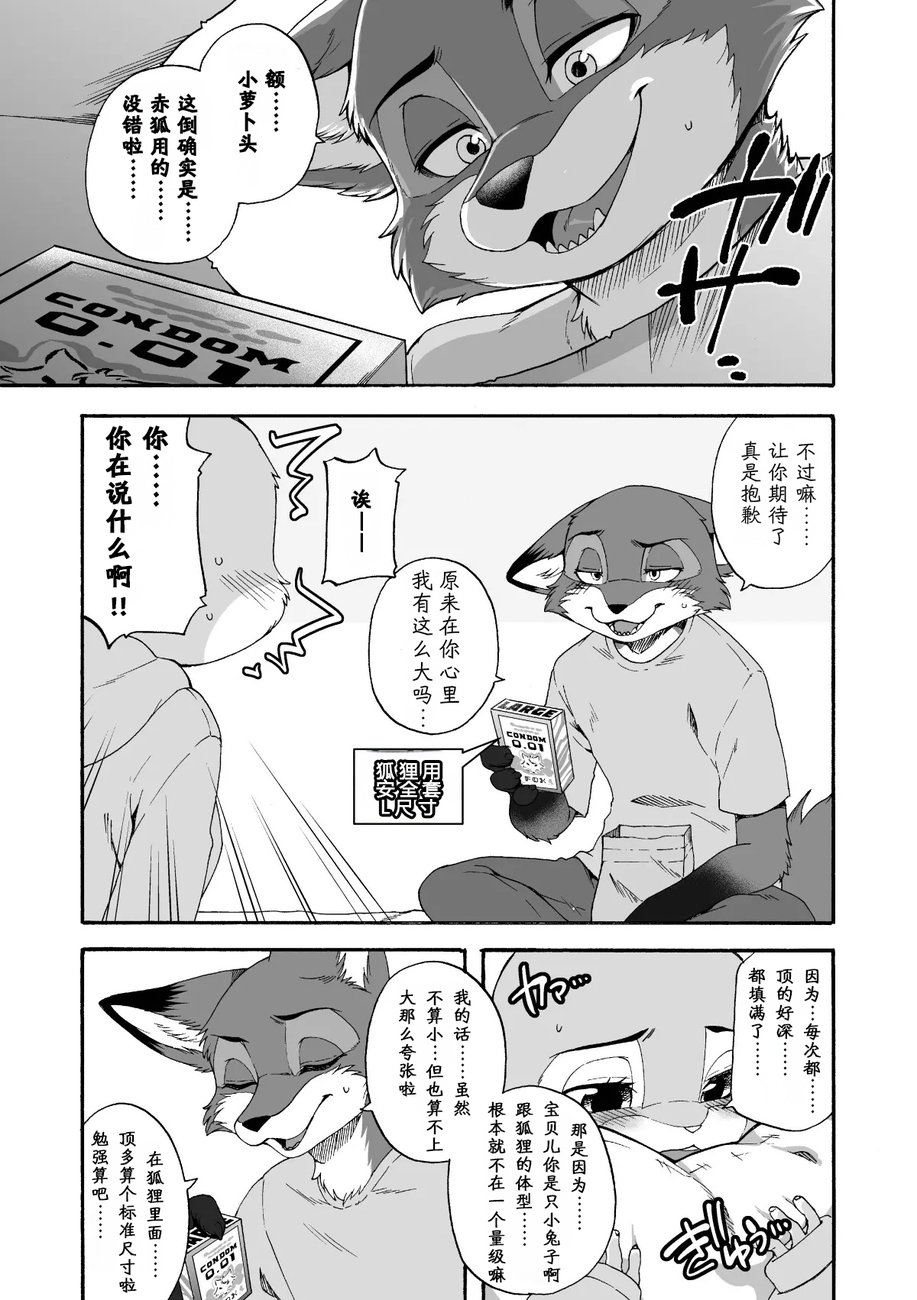
<style>
.page{position:relative;width:917px;height:1300px;background:#ffffff}
.page>*{position:absolute;margin:0}
.t1{font:21.4px/27.5px "HYShiWei75U";color:#000000;font-weight:bold}
.t2{font:27.5px/36.7px "HYShiWei75U";color:#000000;font-weight:bold}
.t3{font:21.4px/27.5px "HYShiWei55U";color:#000000}
.t4{font:22.9px/27.5px "HYShiWei55U";color:#000000}
.t5{font:27.5px "HYShiWei75U";color:#000000;font-weight:bold}
.t6{font:18.3px/18.3px "MicrosoftYaHei";letter-spacing:0.24em;color:#ffffff;font-weight:bold}
.t7{font:18.3px/27.5px "HYShiWei55U";color:#000000;font-weight:bold}
</style>
<div class="page">
<p class="t1" style="left:238px;top:69px;width:48px;height:84px">额……<br>小萝卜头</p>
<p class="t1" style="left:121px;top:93px;width:77px;height:149px">这倒确实是……<br>赤狐用的……<br>没错啦……</p>
<p class="t2" style="left:105px;top:426px;width:63px;height:162px">你……<br>你在说什么啊</p>
<p class="t3" style="left:740px;top:441px;width:76px;height:105px">不过嘛……<br>让你期待了<br>真是抱歉</p>
<p class="t1" style="left:351px;top:489px;width:20px;height:63px">诶——</p>
<p class="t4" style="left:412px;top:569px;width:48px;height:158px">原来在你心里<br>我有这么大吗…</p>
<p class="t5" style="left:111px;top:597px;width:16px;height:20px">!!</p>
<p class="t6" style="left:376px;top:763px;width:65px;height:54px;text-align:center">狐狸用<br>安全套<br>L尺寸</p>
<p class="t7" style="left:748px;top:968px;width:73px;height:146px">因为…每次都……<br>顶的好深……<br>都填满了……</p>
<p class="t7" style="left:398px;top:989px;width:73px;height:163px">我的话……虽然<br>不算小…但也算不上<br>大那么夸张啦</p>
<p class="t7" style="left:487px;top:1101px;width:101px;height:183px">那是因为……<br>宝贝儿你是只小兔子啊<br>跟狐狸的体型……<br>根本就不在一个量级嘛</p>
<p class="t7" style="left:91px;top:1131px;width:73px;height:163px">在狐狸里面……<br>顶多算个标准尺寸啦<br>勉强算吧……</p>
</div>
